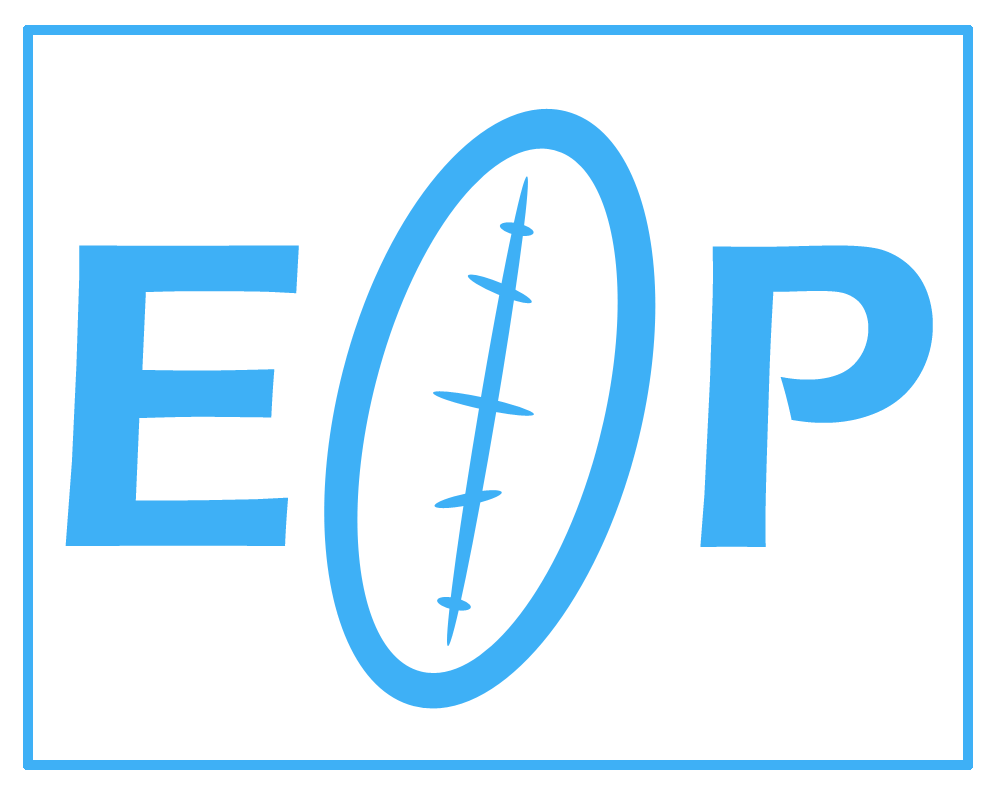
<style>
.page{position:relative;width:1000px;height:800px;background:#ffffff}
.page>*{position:absolute;margin:0}
.t1{font:450.7px "ErasITC-Demi";color:#3eb0f6}
</style>
<div class="page">
<p class="t1" style="left:65px;top:245px;width:234px;height:301px">E</p>
<p class="t1" style="left:700px;top:245px;width:233px;height:302px">P</p>
</div>
